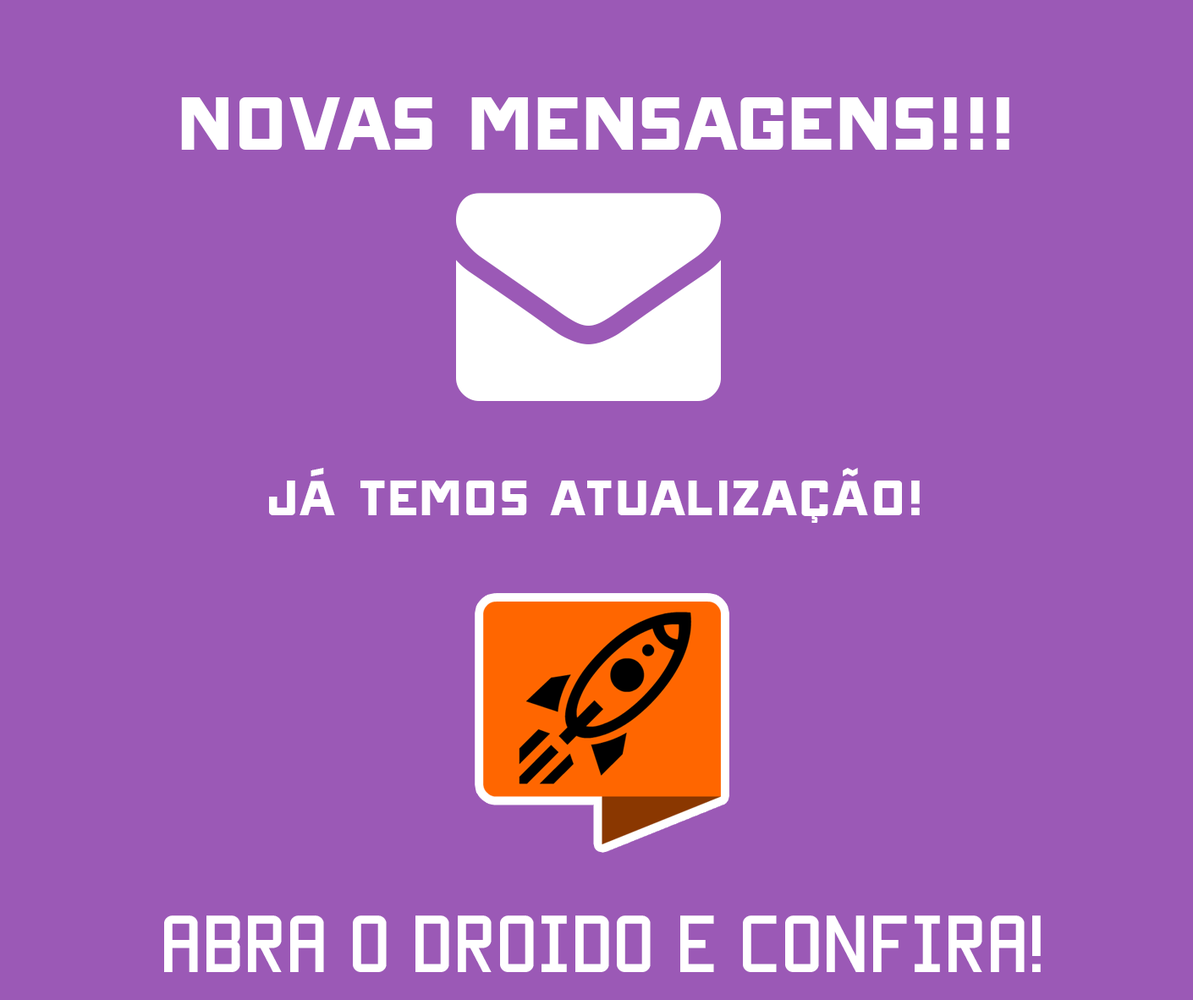
<style>
.page{position:relative;width:1193px;height:1000px;background:#9b59b6}
.page>*{position:absolute;margin:0}
.t1{font:119.7px "ONRAMP";color:#ffffff}
.t2{font:79px "ONRAMP";color:#ffffff}
.t3{font:64.5px "Manteka";color:#ffffff;scale:1.04 1}
</style>
<div class="page">
<p class="t1" style="left:181px;top:97px;width:828px;height:53px">NOVAS MENSAGENS!!!</p>
<p class="t2" style="left:269px;top:468px;width:650px;height:55px">Já temos atualização!</p>
<p class="t3" style="left:164px;top:915px;width:876px;height:57px">Abra o droido e confira!</p>
</div>
